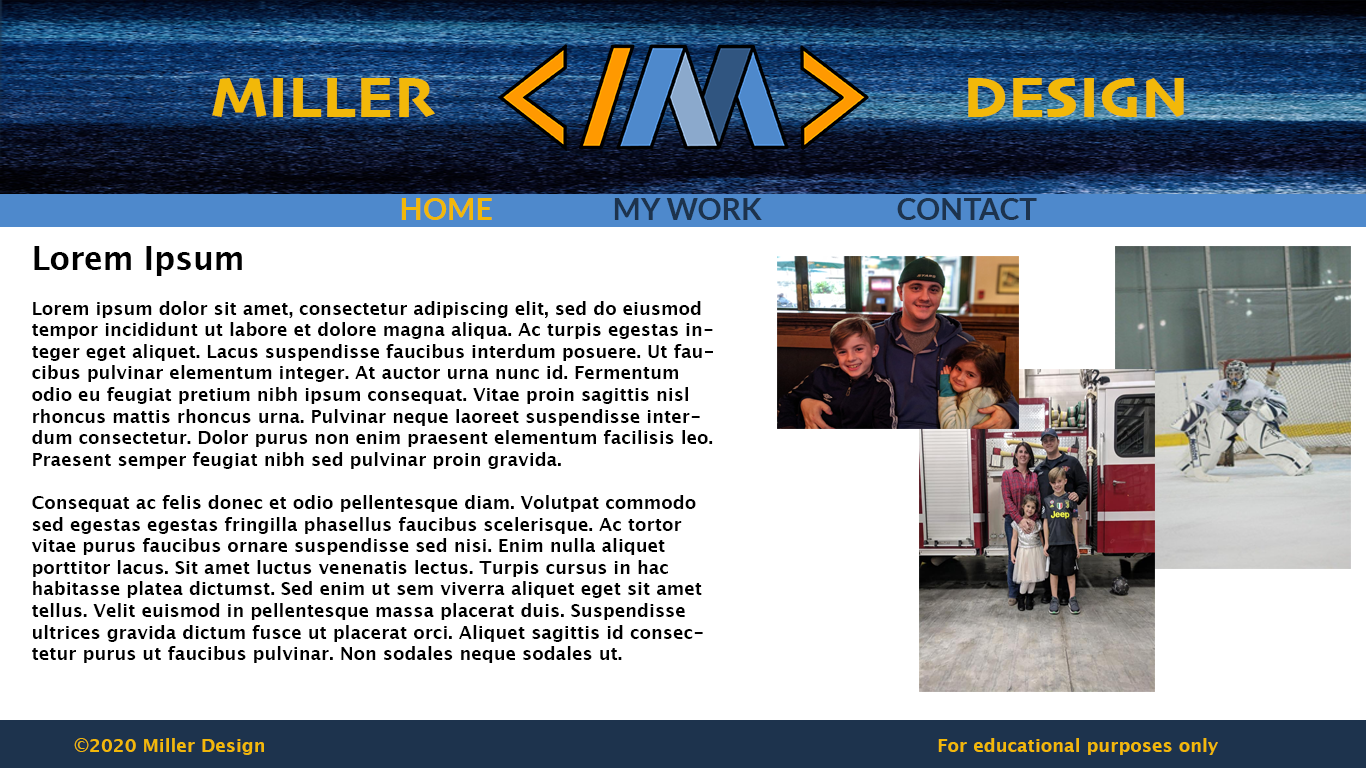
<style>
.page{position:relative;width:1366px;height:768px;background:#ffffff}
.page>*{position:absolute;margin:0}
.t1{font:60px "Skia-Bold";color:#f2b809}
.t2{font:30px "Lato-Bold";color:#f2b809}
.t3{font:30px "Lato-Bold";color:#1d334d}
.t4{font:18px "LucidaGrande-Bold";color:#000000}
.t5{font:31.5px "LucidaGrande-Bold";color:#000000}
.t6{font:18px "LucidaGrande-Bold";color:#f2b809}
</style>
<div class="page">
<p class="t1" style="left:212px;top:78px;width:223px;height:39px">MILLER</p>
<p class="t1" style="left:968px;top:78px;width:216px;height:39px">DESIGN</p>
<p class="t2" style="left:401px;top:198px;width:91px;height:22px">HOME</p>
<p class="t3" style="left:614px;top:198px;width:148px;height:22px">MY WORK</p>
<p class="t3" style="left:897px;top:198px;width:140px;height:22px">CONTACT</p>
<p class="t4" style="left:31px;top:246px;width:682px;height:417px"><span class="t5">Lorem Ipsum<br><br></span>Lorem ipsum dolor sit amet, consectetur adipiscing elit, sed do eiusmod tempor incididunt ut labore et dolore magna aliqua. Ac turpis egestas integer eget aliquet. Lacus suspendisse faucibus interdum posuere. Ut faucibus pulvinar elementum integer. At auctor urna nunc id. Fermentum odio eu feugiat pretium nibh ipsum consequat. Vitae proin sagittis nisl rhoncus mattis rhoncus urna. Pulvinar neque laoreet suspendisse interdum consectetur. Dolor purus non enim praesent elementum facilisis leo. Praesent semper feugiat nibh sed pulvinar proin gravida.<br><br>Consequat ac felis donec et odio pellentesque diam. Volutpat commodo sed egestas egestas fringilla phasellus faucibus scelerisque. Ac tortor vitae purus faucibus ornare suspendisse sed nisi. Enim nulla aliquet porttitor lacus. Sit amet luctus venenatis lectus. Turpis cursus in hac habitasse platea dictumst. Sed enim ut sem viverra aliquet eget sit amet tellus. Velit euismod in pellentesque massa placerat duis. Suspendisse ultrices gravida dictum fusce ut placerat orci. Aliquet sagittis id consectetur purus ut faucibus pulvinar. Non sodales neque sodales ut.</p>
<p class="t6" style="left:74px;top:738px;width:190px;height:17px">©2020 Miller Design</p>
<p class="t6" style="left:938px;top:738px;width:280px;height:17px">For educational purposes only</p>
</div>
